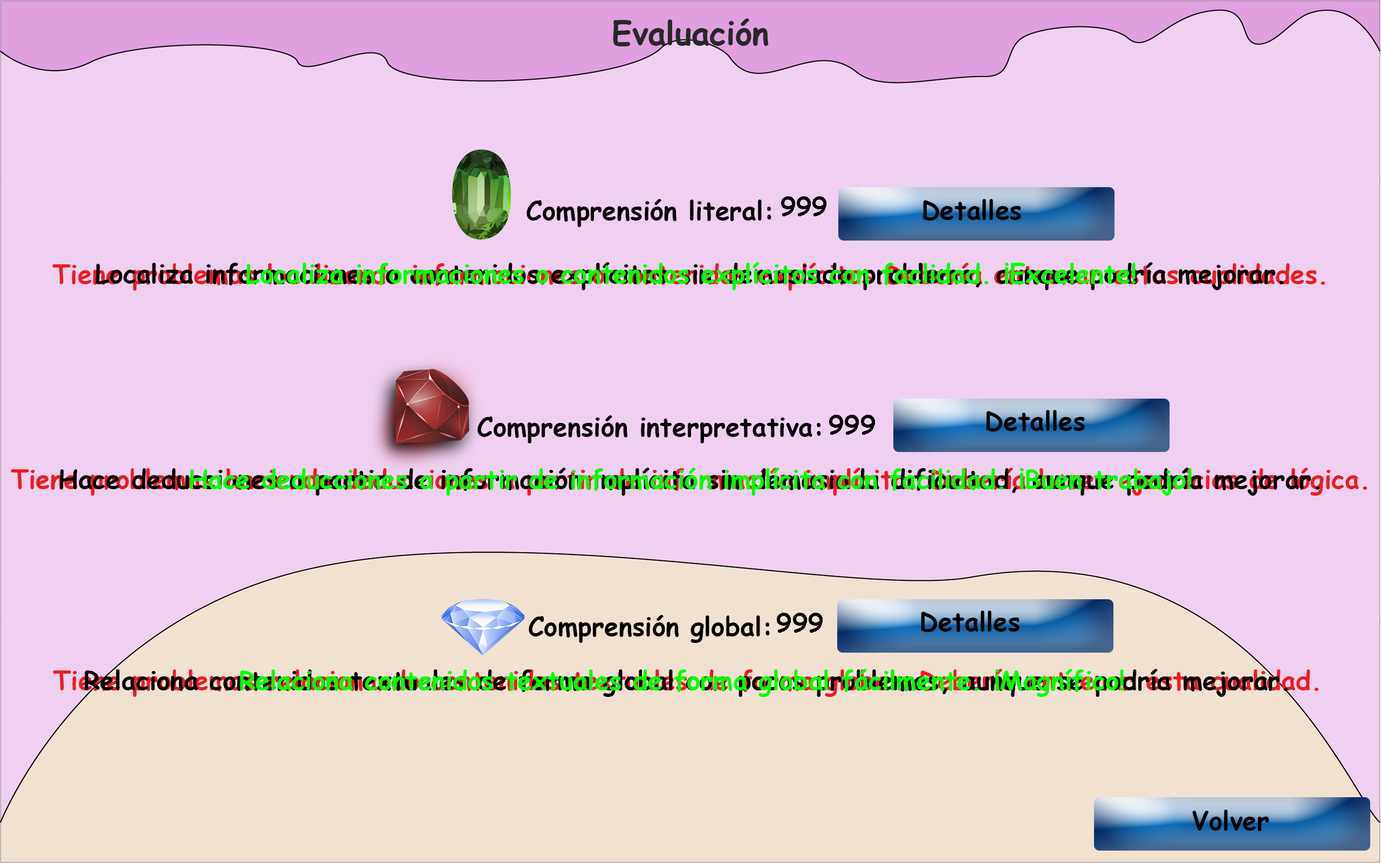
<style>
.page{position:relative;width:1381px;height:863px;background:#efd0f0}
.page>*{position:absolute;margin:0}
.t1{font:32.4px "ComicSansMS-Bold";color:#282828}
.t2{font:25.9px "ComicSansMS-Bold";color:#010101}
.t3{font:25.9px "ComicSansMS-Bold";color:#000000}
.t4{font:25.9px "ComicSansMS-Bold"}
.t5{font:25.9px "ComicSansMS-Bold";color:#00ff00}
</style>
<div class="page">
<p class="t1" style="left:613px;top:18px;width:156px;height:28px">Evaluación</p>
<p class="t2" style="left:781px;top:196px;width:46px;height:20px">999</p>
<p class="t3" style="left:527px;top:199px;width:245px;height:28px">Comprensión literal:</p>
<p class="t3" style="left:923px;top:199px;width:98px;height:22px">Detalles</p>
<p class="t4" style="left:52px;top:263px;width:1274px;height:28px">Tiene problemas localizando informaciones o contenidos explícitos.Debería entrenar estas cualidades.</p>
<p class="t4" style="left:96px;top:262px;width:1188px;height:28px">Localiza informaciones o contenidos explícitos sin demasiado problema, aunque podría mejorar.</p>
<p class="t5" style="left:246px;top:262px;width:890px;height:28px">Localiza informaciones o contenidos explícitos con faclidad. ¡Excelente!</p>
<p class="t3" style="left:986px;top:410px;width:99px;height:22px">Detalles</p>
<p class="t3" style="left:478px;top:415px;width:343px;height:29px">Comprensión interpretativa:</p>
<p class="t2" style="left:829px;top:415px;width:46px;height:20px">999</p>
<p class="t4" style="left:11px;top:468px;width:1357px;height:28px">Tiene problemas haciendo deducciones a partir de información implícita. Debería hacer ejercicios de lógica.</p>
<p class="t4" style="left:59px;top:468px;width:1261px;height:28px">Hace deducciones a partir de información implícita sin demasiada dificultad, aunque podría mejorar.</p>
<p class="t5" style="left:189px;top:468px;width:1003px;height:28px">Hace deducciones a partir de información implícita con facilidad. ¡Buen trabajo!</p>
<p class="t3" style="left:529px;top:615px;width:241px;height:28px">Comprensión global:</p>
<p class="t3" style="left:777px;top:613px;width:46px;height:20px">999</p>
<p class="t3" style="left:921px;top:611px;width:99px;height:21px">Detalles</p>
<p class="t4" style="left:53px;top:669px;width:1266px;height:28px">Tiene problemas relacionando contenidos textuales de forma global. Debería entrenar esta cualidad.</p>
<p class="t3" style="left:85px;top:669px;width:1203px;height:28px">Relaciona contenidos textuales de forma global con pocos problemas, aunque se podría mejorar.</p>
<p class="t5" style="left:240px;top:669px;width:884px;height:28px">Relaciona contenidos textuales de forma global fácilmente. ¡Magnífico!</p>
<p class="t3" style="left:1192px;top:810px;width:78px;height:21px">Volver</p>
</div>
